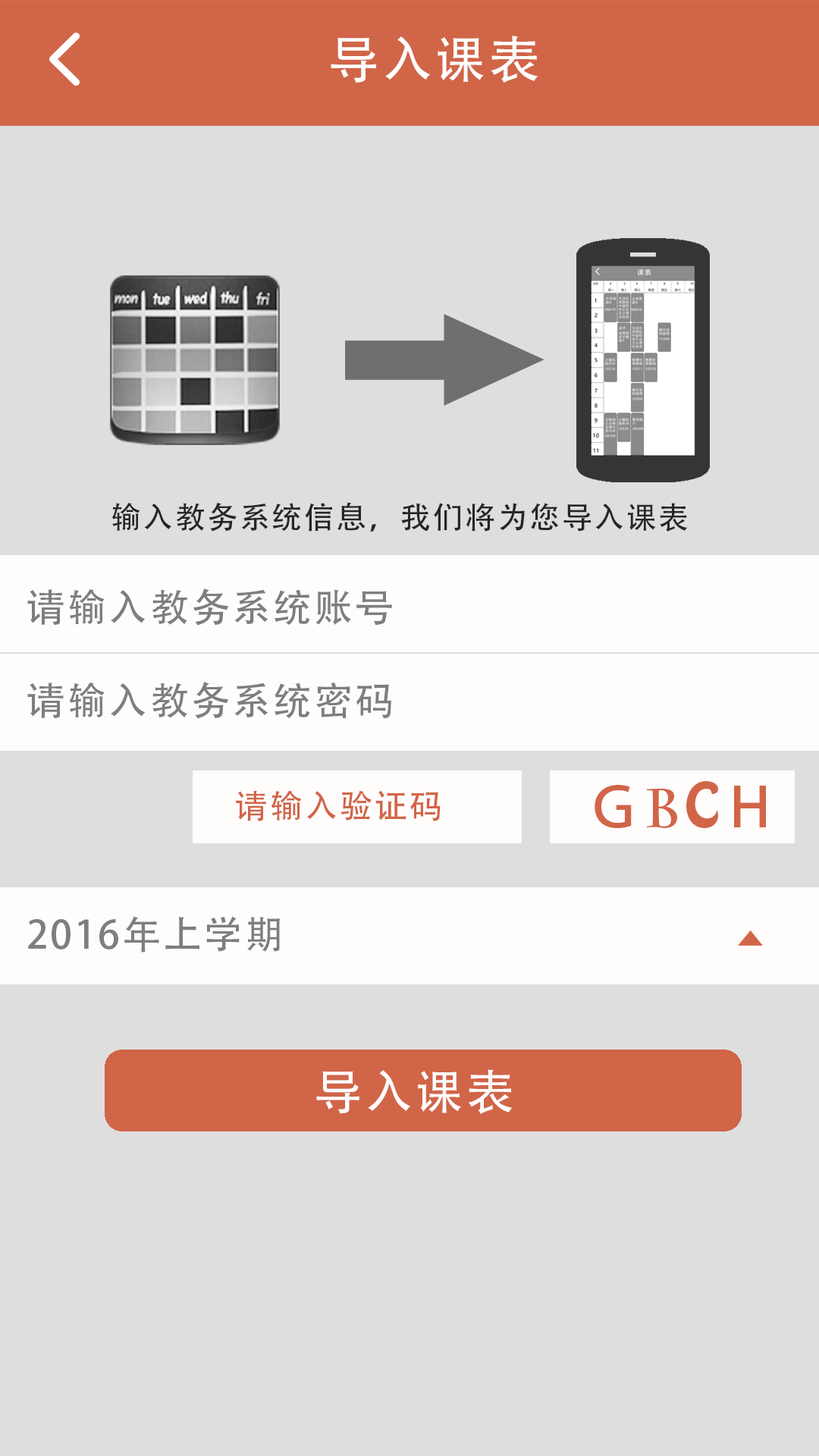
<style>
.page{position:relative;width:819px;height:1456px;background:#dedede}
.page>*{position:absolute;margin:0}
.t1{font:50.8px "AdobeHeitiStd-Regular";letter-spacing:0.06em;color:#ffffff}
.t2{font:30.4px "AdobeHeitiStd-Regular";letter-spacing:0.06em;color:#262626}
.t3{font:38.7px "AdobeHeitiStd-Regular";letter-spacing:0.06em;color:#7f7e7e}
.t4{font:54.6px "AdobeHeitiStd-Regular";letter-spacing:0.06em;color:#d16548}
.t5{font:54.6px "CharlemagneStd-Bold";letter-spacing:0.06em;color:#d16548}
.t6{font:54.6px "HoboStd";letter-spacing:0.06em;color:#d16548}
.t7{font:32.8px "AdobeHeitiStd-Regular";letter-spacing:0.06em;color:#d16548}
.t8{font:47.8px "AdobeHeitiStd-Regular";letter-spacing:0.06em;color:#fffcfc}
</style>
<div class="page">
<p class="t1" style="left:331px;top:36px;width:207px;height:47px">导入课表</p>
<p class="t2" style="left:111px;top:502px;width:577px;height:30px">输入教务系统信息，我们将为您导入课表</p>
<p class="t3" style="left:27px;top:588px;width:365px;height:38px">请输入教务系统账号</p>
<p class="t3" style="left:27px;top:682px;width:364px;height:37px">请输入教务系统密码</p>
<p class="t4" style="left:595px;top:781px;width:171px;height:47px">Ｇ<span class="t5">B</span><span class="t6">C</span>Ｈ</p>
<p class="t7" style="left:236px;top:790px;width:205px;height:31px">请输入验证码</p>
<p class="t3" style="left:28px;top:916px;width:252px;height:36px">2016年上学期</p>
<p class="t8" style="left:316px;top:1069px;width:197px;height:45px">导入课表</p>
</div>
